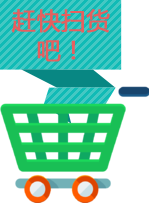
<style>
.page{position:relative;width:149px;height:203px;background:#ffffff}
.page>*{position:absolute;margin:0}
.t1{font:24px/30px "MicrosoftYaHei";color:#e65f5f;text-transform:uppercase;font-weight:bold}
</style>
<div class="page">
<p class="t1" style="left:11px;top:9px;width:99px;height:53px;text-align:center">赶快扫货<br>吧！</p>
</div>
